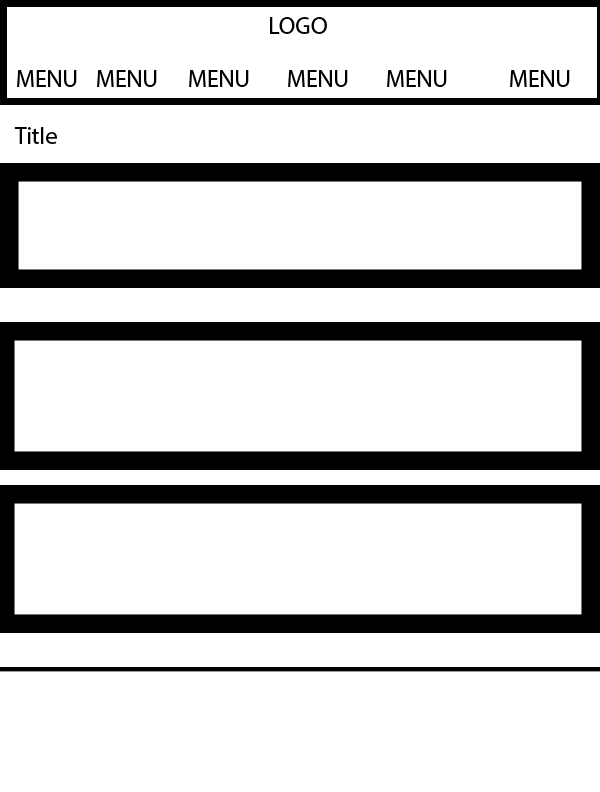
<style>
.page{position:relative;width:600px;height:792px;background:#ffffff}
.page>*{position:absolute;margin:0}
.t1{font:24px "MyriadPro-Regular";color:#000000}
</style>
<div class="page">
<p class="t1" style="left:270px;top:17px;width:57px;height:17px">LOGO</p>
<p class="t1" style="left:17px;top:70px;width:60px;height:17px">MENU</p>
<p class="t1" style="left:97px;top:70px;width:60px;height:17px">MENU</p>
<p class="t1" style="left:189px;top:70px;width:60px;height:17px">MENU</p>
<p class="t1" style="left:288px;top:70px;width:60px;height:17px">MENU</p>
<p class="t1" style="left:387px;top:70px;width:60px;height:17px">MENU</p>
<p class="t1" style="left:510px;top:70px;width:60px;height:17px">MENU</p>
<p class="t1" style="left:14px;top:127px;width:43px;height:17px">Title</p>
</div>
